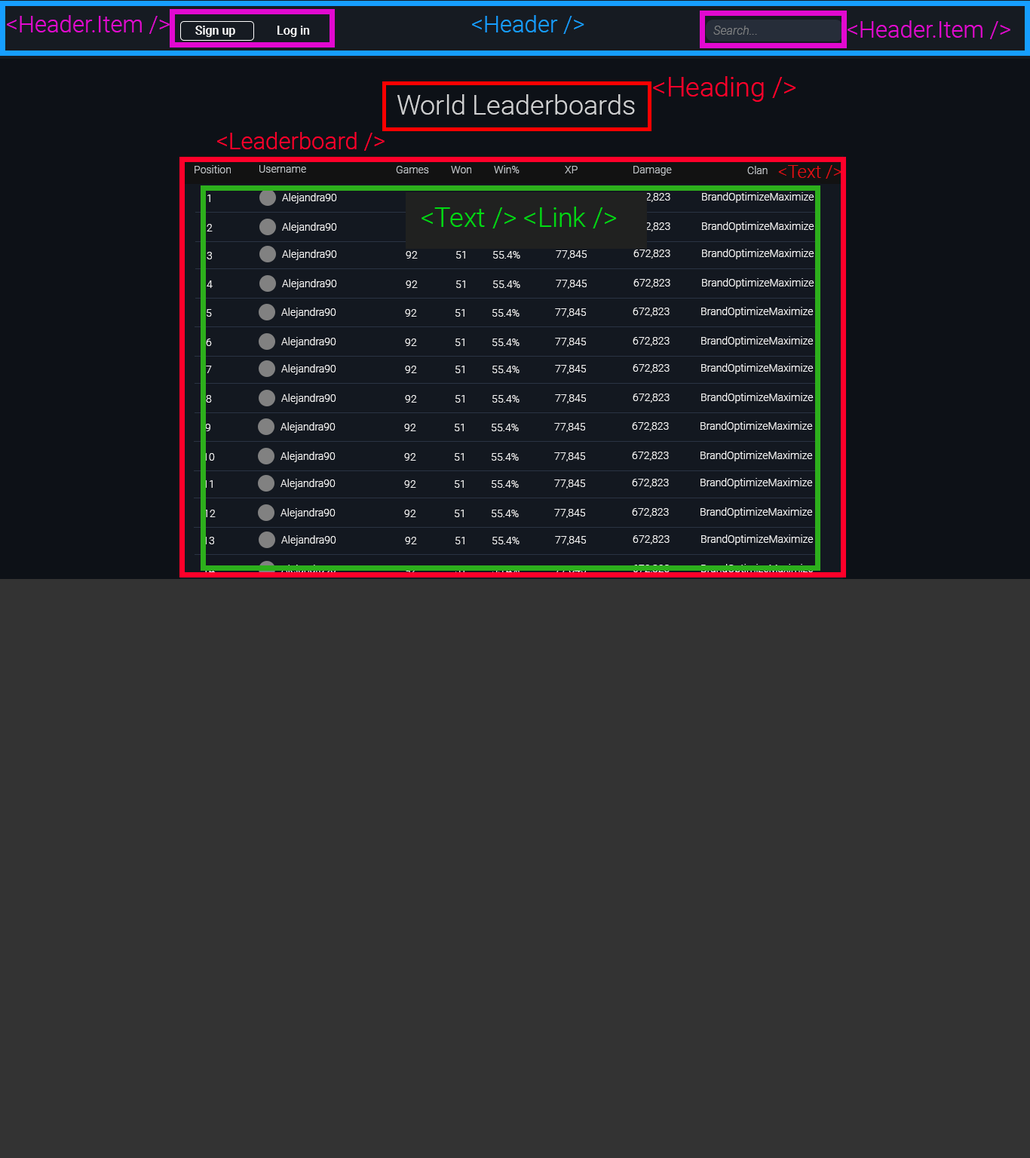
<style>
.page{position:relative;width:1030px;height:1158px;background:#333333}
.page>*{position:absolute;margin:0}
.t1{font:23.5px "Roboto-Light";color:#e209d0}
.t2{font:23.5px "Roboto-Light";color:#169eff}
.t3{font:12.1px "Roboto-Medium";color:#ffffff}
.t4{font:12.1px "Roboto-LightItalic";color:#808283}
.t5{font:27.1px "Roboto-Light";color:#ff002a}
.t6{font:27.1px "Roboto-Light";color:#d0d1d2}
.t7{font:23.5px "Roboto-Light";color:#ff002a}
.t8{font:10.6px "Roboto-Light";color:#c0c3c6}
.t9{font:18.1px "Roboto-Light";color:#e90e13}
.t10{font:10.6px "Roboto-Light";color:#f4f4f4}
.t11{font:27.1px "Roboto-Light";color:#00d912}
.t12{font:10.6px "Roboto-Light"}
.t13{font:10.6px "Roboto-Light";color:#2daf1c}
</style>
<div class="page">
<p class="t1" style="left:7px;top:15px;width:163px;height:19px">&lt;Header.Item /&gt;</p>
<p class="t2" style="left:472px;top:15px;width:112px;height:19px">&lt;Header /&gt;</p>
<p class="t3" style="left:195px;top:26px;width:40px;height:11px">Sign up</p>
<p class="t3" style="left:277px;top:26px;width:33px;height:11px">Log in</p>
<p class="t4" style="left:713px;top:26px;width:44px;height:9px">Search...</p>
<p class="t1" style="left:847px;top:20px;width:163px;height:19px">&lt;Header.Item /&gt;</p>
<p class="t5" style="left:653px;top:76px;width:143px;height:26px">&lt;Heading /&gt;</p>
<p class="t6" style="left:397px;top:94px;width:238px;height:21px">World Leaderboards</p>
<p class="t7" style="left:217px;top:132px;width:167px;height:19px">&lt;Leaderboard /&gt;</p>
<p class="t8" style="left:194px;top:165px;width:37px;height:8px">Position</p>
<p class="t8" style="left:259px;top:165px;width:47px;height:8px">Username</p>
<p class="t8" style="left:396px;top:166px;width:33px;height:7px">Games</p>
<p class="t8" style="left:451px;top:166px;width:20px;height:7px">Won</p>
<p class="t8" style="left:494px;top:165px;width:25px;height:8px">Win%</p>
<p class="t8" style="left:565px;top:166px;width:12px;height:7px">XP</p>
<p class="t8" style="left:633px;top:166px;width:39px;height:10px">Damage</p>
<p class="t8" style="left:747px;top:166px;width:20px;height:8px">Clan</p>
<p class="t9" style="left:778px;top:165px;width:63px;height:14px">&lt;Text /&gt;</p>
<p class="t10" style="left:207px;top:194px;width:3px;height:8px">1</p>
<p class="t10" style="left:282px;top:193px;width:55px;height:11px">Alejandra90</p>
<p class="t10" style="left:633px;top:193px;width:37px;height:9px">672,823</p>
<p class="t10" style="left:702px;top:192px;width:112px;height:11px">BrandOptimizeMaximize</p>
<p class="t11" style="left:421px;top:207px;width:196px;height:21px">&lt;Text /&gt; &lt;Link /&gt;</p>
<p class="t10" style="left:702px;top:222px;width:112px;height:10px">BrandOptimizeMaximize</p>
<p class="t10" style="left:207px;top:224px;width:6px;height:7px">2</p>
<p class="t10" style="left:282px;top:222px;width:55px;height:11px">Alejandra90</p>
<p class="t10" style="left:633px;top:222px;width:37px;height:9px">672,823</p>
<p class="t10" style="left:207px;top:252px;width:5px;height:7px">3</p>
<p class="t10" style="left:282px;top:250px;width:55px;height:10px">Alejandra90</p>
<p class="t10" style="left:406px;top:251px;width:12px;height:8px">92</p>
<p class="t10" style="left:456px;top:251px;width:9px;height:8px">51</p>
<p class="t10" style="left:493px;top:251px;width:27px;height:8px">55.4%</p>
<p class="t10" style="left:556px;top:250px;width:31px;height:9px">77,845</p>
<p class="t10" style="left:633px;top:250px;width:37px;height:9px">672,823</p>
<p class="t10" style="left:702px;top:249px;width:112px;height:10px">BrandOptimizeMaximize</p>
<p class="t10" style="left:207px;top:280px;width:6px;height:8px">4</p>
<p class="t10" style="left:282px;top:279px;width:55px;height:10px">Alejandra90</p>
<p class="t10" style="left:406px;top:280px;width:12px;height:8px">92</p>
<p class="t10" style="left:456px;top:280px;width:9px;height:8px">51</p>
<p class="t10" style="left:493px;top:280px;width:27px;height:8px">55.4%</p>
<p class="t10" style="left:556px;top:280px;width:31px;height:9px">77,845</p>
<p class="t10" style="left:633px;top:279px;width:37px;height:9px">672,823</p>
<p class="t10" style="left:702px;top:278px;width:112px;height:11px">BrandOptimizeMaximize</p>
<p class="t10" style="left:207px;top:309px;width:5px;height:8px">5</p>
<p class="t10" style="left:281px;top:308px;width:55px;height:10px">Alejandra90</p>
<p class="t10" style="left:405px;top:309px;width:12px;height:8px">92</p>
<p class="t10" style="left:455px;top:309px;width:9px;height:8px">51</p>
<p class="t10" style="left:492px;top:309px;width:27px;height:8px">55.4%</p>
<p class="t10" style="left:555px;top:308px;width:31px;height:9px">77,845</p>
<p class="t10" style="left:632px;top:308px;width:37px;height:9px">672,823</p>
<p class="t10" style="left:701px;top:307px;width:112px;height:10px">BrandOptimizeMaximize</p>
<p class="t10" style="left:206px;top:338px;width:6px;height:8px">6</p>
<p class="t10" style="left:281px;top:337px;width:55px;height:11px">Alejandra90</p>
<p class="t10" style="left:405px;top:338px;width:12px;height:8px">92</p>
<p class="t10" style="left:455px;top:338px;width:9px;height:8px">51</p>
<p class="t10" style="left:492px;top:338px;width:27px;height:8px">55.4%</p>
<p class="t10" style="left:555px;top:338px;width:31px;height:9px">77,845</p>
<p class="t10" style="left:632px;top:337px;width:37px;height:9px">672,823</p>
<p class="t10" style="left:701px;top:336px;width:112px;height:11px">BrandOptimizeMaximize</p>
<p class="t10" style="left:206px;top:366px;width:6px;height:7px">7</p>
<p class="t10" style="left:281px;top:364px;width:55px;height:11px">Alejandra90</p>
<p class="t10" style="left:405px;top:366px;width:12px;height:7px">92</p>
<p class="t10" style="left:455px;top:366px;width:9px;height:7px">51</p>
<p class="t10" style="left:492px;top:366px;width:27px;height:7px">55.4%</p>
<p class="t10" style="left:555px;top:365px;width:31px;height:9px">77,845</p>
<p class="t10" style="left:632px;top:364px;width:37px;height:9px">672,823</p>
<p class="t10" style="left:701px;top:363px;width:112px;height:11px">BrandOptimizeMaximize</p>
<p class="t10" style="left:206px;top:395px;width:6px;height:8px">8</p>
<p class="t10" style="left:281px;top:394px;width:55px;height:10px">Alejandra90</p>
<p class="t10" style="left:405px;top:395px;width:12px;height:8px">92</p>
<p class="t10" style="left:455px;top:395px;width:9px;height:8px">51</p>
<p class="t10" style="left:492px;top:395px;width:27px;height:8px">55.4%</p>
<p class="t10" style="left:555px;top:394px;width:31px;height:9px">77,845</p>
<p class="t10" style="left:632px;top:394px;width:37px;height:9px">672,823</p>
<p class="t10" style="left:701px;top:393px;width:112px;height:10px">BrandOptimizeMaximize</p>
<p class="t10" style="left:205px;top:424px;width:5px;height:7px">9</p>
<p class="t10" style="left:280px;top:422px;width:55px;height:11px">Alejandra90</p>
<p class="t10" style="left:404px;top:424px;width:12px;height:7px">92</p>
<p class="t10" style="left:455px;top:424px;width:9px;height:7px">51</p>
<p class="t10" style="left:492px;top:424px;width:27px;height:7px">55.4%</p>
<p class="t10" style="left:554px;top:423px;width:31px;height:9px">77,845</p>
<p class="t10" style="left:632px;top:422px;width:37px;height:9px">672,823</p>
<p class="t10" style="left:700px;top:421px;width:113px;height:11px">BrandOptimizeMaximize</p>
<p class="t10" style="left:204px;top:453px;width:11px;height:8px">10</p>
<p class="t10" style="left:280px;top:452px;width:55px;height:10px">Alejandra90</p>
<p class="t10" style="left:404px;top:453px;width:12px;height:8px">92</p>
<p class="t10" style="left:455px;top:453px;width:9px;height:8px">51</p>
<p class="t10" style="left:492px;top:453px;width:27px;height:8px">55.4%</p>
<p class="t10" style="left:554px;top:452px;width:31px;height:9px">77,845</p>
<p class="t10" style="left:632px;top:452px;width:37px;height:9px">672,823</p>
<p class="t10" style="left:700px;top:451px;width:113px;height:10px">BrandOptimizeMaximize</p>
<p class="t10" style="left:204px;top:480px;width:9px;height:8px">11</p>
<p class="t10" style="left:280px;top:479px;width:55px;height:10px">Alejandra90</p>
<p class="t10" style="left:404px;top:480px;width:12px;height:8px">92</p>
<p class="t10" style="left:455px;top:480px;width:9px;height:8px">51</p>
<p class="t10" style="left:492px;top:480px;width:27px;height:8px">55.4%</p>
<p class="t10" style="left:554px;top:479px;width:31px;height:10px">77,845</p>
<p class="t10" style="left:632px;top:479px;width:37px;height:9px">672,823</p>
<p class="t10" style="left:700px;top:478px;width:113px;height:11px">BrandOptimizeMaximize</p>
<p class="t10" style="left:204px;top:510px;width:12px;height:7px">12</p>
<p class="t10" style="left:280px;top:508px;width:55px;height:11px">Alejandra90</p>
<p class="t10" style="left:404px;top:510px;width:12px;height:7px">92</p>
<p class="t10" style="left:455px;top:510px;width:9px;height:7px">51</p>
<p class="t10" style="left:492px;top:510px;width:27px;height:7px">55.4%</p>
<p class="t10" style="left:554px;top:509px;width:31px;height:9px">77,845</p>
<p class="t10" style="left:632px;top:508px;width:37px;height:9px">672,823</p>
<p class="t10" style="left:700px;top:507px;width:113px;height:11px">BrandOptimizeMaximize</p>
<p class="t10" style="left:204px;top:537px;width:10px;height:7px">13</p>
<p class="t10" style="left:281px;top:535px;width:55px;height:11px">Alejandra90</p>
<p class="t10" style="left:405px;top:537px;width:12px;height:7px">92</p>
<p class="t10" style="left:455px;top:537px;width:9px;height:7px">51</p>
<p class="t10" style="left:492px;top:537px;width:27px;height:7px">55.4%</p>
<p class="t10" style="left:555px;top:536px;width:31px;height:9px">77,845</p>
<p class="t10" style="left:632px;top:535px;width:37px;height:9px">672,823</p>
<p class="t10" style="left:701px;top:534px;width:112px;height:11px">BrandOptimizeMaximize</p>
<p class="t12" style="left:204px;top:566px;width:11px;height:8px">14</p>
<p class="t13" style="left:281px;top:565px;width:55px;height:10px">Alejandra90</p>
<p class="t12" style="left:555px;top:565px;width:31px;height:9px">77,845</p>
<p class="t10" style="left:632px;top:565px;width:37px;height:9px">672,823</p>
<p class="t12" style="left:701px;top:564px;width:112px;height:10px">BrandOptimizeMaximize</p>
</div>
